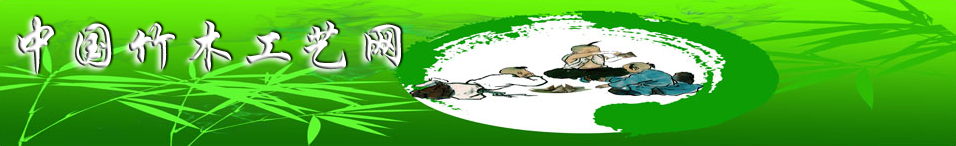
<style>
.page{position:relative;width:956px;height:146px}
.page>*{position:absolute;margin:0}
.t1{font:58px "STXingkai";color:#ffffff}
</style>
<div class="page">
<p class="t1" style="left:16px;top:16px;width:385px;height:58px">中国竹木工艺网</p>
</div>
